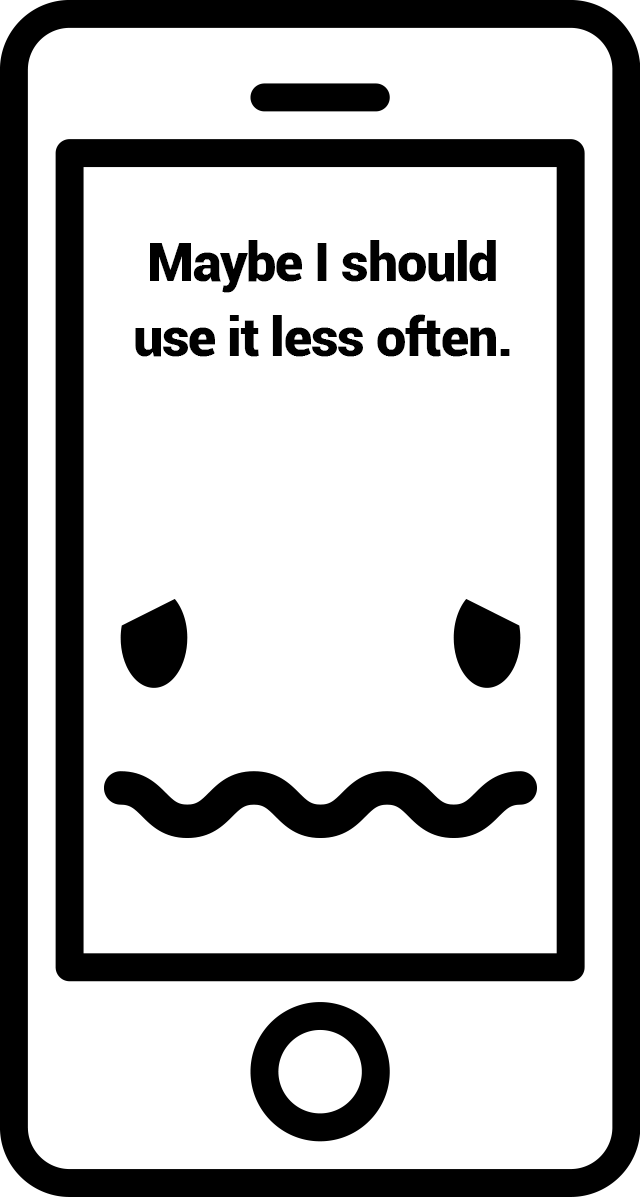
<style>
.page{position:relative;width:640px;height:1197px;background:#ffffff}
.page>*{position:absolute;margin:0}
.t1{font:54.2px/75px "Roboto-Black";letter-spacing:-0.025em;color:#000000}
</style>
<div class="page">
<p class="t1" style="left:135px;top:240px;width:375px;height:117px;text-align:center">Maybe I should use it less often.</p>
</div>
